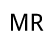
<style>
.page{position:relative;width:53px;height:41px;background:#ffffff}
.page>*{position:absolute;margin:0}
.t1{font:23.7px "DroidSans";color:#000000}
</style>
<div class="page">
<p class="t1" style="left:11px;top:13px;width:33px;height:18px">MR</p>
</div>
